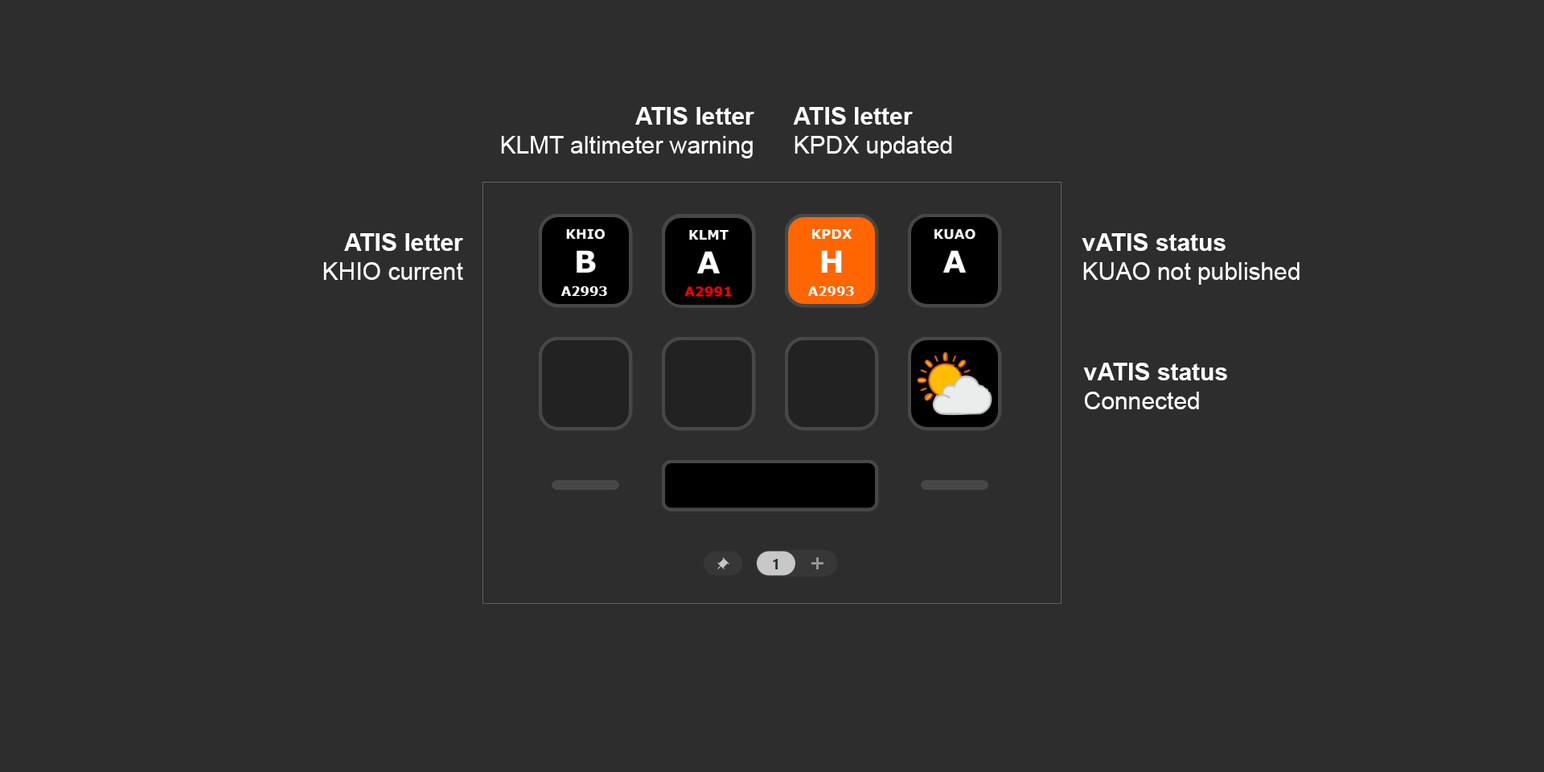
<style>
.page{position:relative;width:1544px;height:772px;background:#2d2d2d}
.page>*{position:absolute;margin:0}
.t1{font:24.1px "ArialMT";color:#ffffff}
.t2{font:24.1px "Arial-BoldMT";color:#ffffff}
.t3{font:12.9px "Verdana-Bold";color:#ffffff}
</style>
<div class="page">
<p class="t1" style="left:501px;top:107px;width:253px;height:51px;text-align:right"><span class="t2">ATIS letter<br></span>KLMT altimeter warning</p>
<p class="t1" style="left:793px;top:107px;width:159px;height:51px"><span class="t2">ATIS letter<br></span>KPDX updated</p>
<p class="t1" style="left:323px;top:233px;width:140px;height:47px;text-align:right"><span class="t2">ATIS letter<br></span>KHIO current</p>
<p class="t1" style="left:1082px;top:233px;width:218px;height:52px"><span class="t2">vATIS status<br></span>KUAO not published</p>
<p class="t3" style="left:561px;top:286px;width:46px;height:10px">A2993</p>
<p class="t3" style="left:808px;top:286px;width:46px;height:10px">A2993</p>
<p class="t2" style="left:1083px;top:363px;width:144px;height:46px">vATIS status<br><span class="t1">Connected</span></p>
</div>
